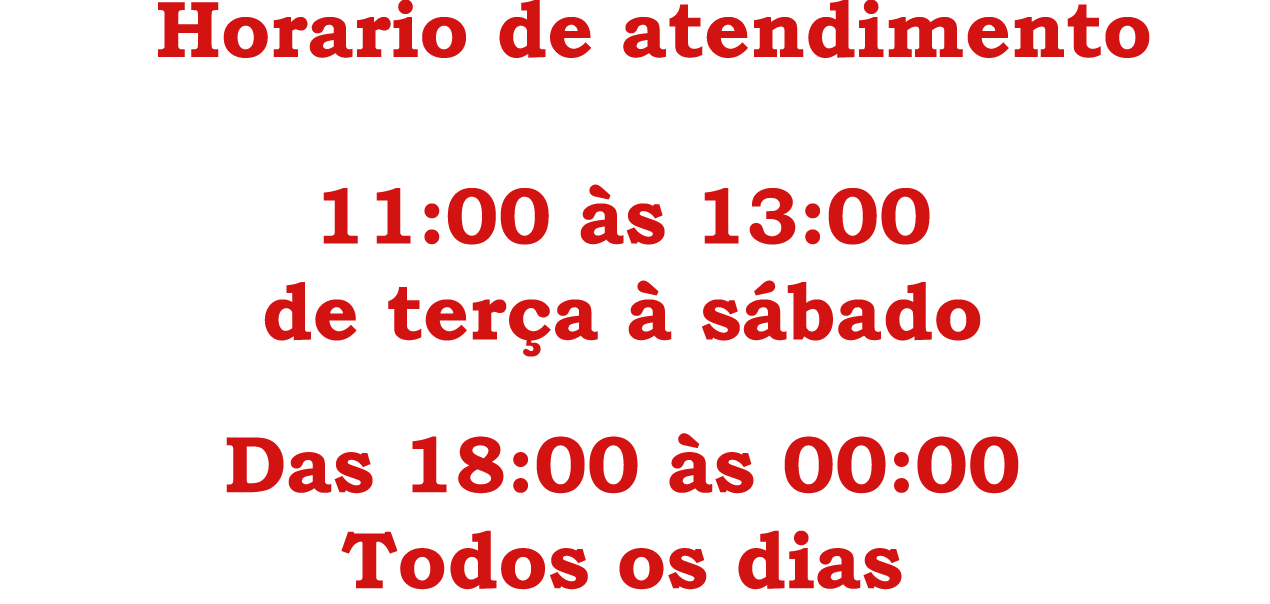
<style>
.page{position:relative;width:1270px;height:604px;background:#ffffff}
.page>*{position:absolute;margin:0}
.t1{font:80px "BookmanOldStyle-Bold";color:#d31212}
</style>
<div class="page">
<p class="t1" style="left:158px;top:0px;width:992px;height:58px">Horario de atendimento</p>
<p class="t1" style="left:264px;top:184px;width:717px;height:173px;text-align:center">11:00 às 13:00<br>de terça à sábado</p>
<p class="t1" style="left:226px;top:433px;width:793px;height:157px;text-align:center">Das 18:00 às 00:00<br>Todos os dias</p>
</div>
